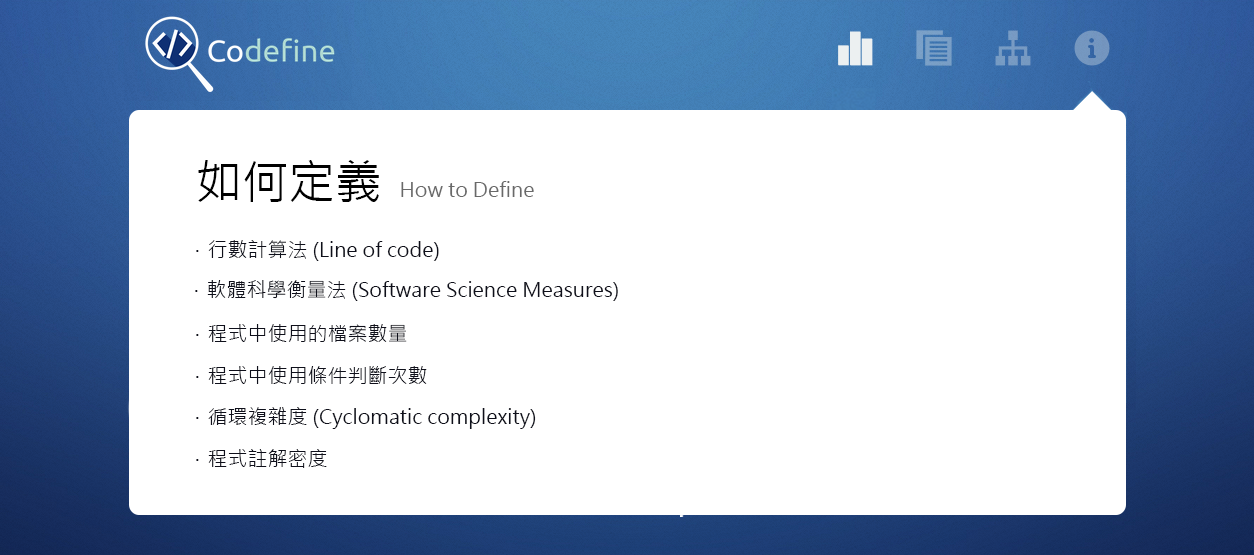
<style>
.page{position:relative;width:1254px;height:555px;background:#ffffff}
.page>*{position:absolute;margin:0}
.t1{font:46.7px "MicrosoftJhengHeiRegular";color:#000000}
.t2{font:20px "MicrosoftJhengHeiRegular";color:#696969}
.t3{font:20px "MicrosoftJhengHeiRegular";color:#0e0f1a}
</style>
<div class="page">
<p class="t1" style="left:198px;top:160px;width:181px;height:42px">如何定義</p>
<p class="t2" style="left:401px;top:181px;width:133px;height:16px">How to Define</p>
<p class="t3" style="left:196px;top:240px;width:243px;height:21px">．行數計算法 (Line of code)</p>
<p class="t3" style="left:195px;top:280px;width:423px;height:21px">．軟體科學衡量法 (Software Science Measures)</p>
<p class="t3" style="left:196px;top:324px;width:211px;height:18px">．程式中使用的檔案數量</p>
<p class="t3" style="left:196px;top:366px;width:231px;height:18px">．程式中使用條件判斷次數</p>
<p class="t3" style="left:196px;top:407px;width:340px;height:22px">．循環複雜度 (Cyclomatic complexity)</p>
<p class="t3" style="left:196px;top:449px;width:131px;height:19px">．程式註解密度</p>
</div>
